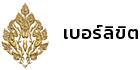
<style>
.page{position:relative;width:140px;height:70px;background:#ffffff}
.page>*{position:absolute;margin:0}
.t1{font:18px "Kanit-Medium";letter-spacing:0.04em;color:#000000}
</style>
<div class="page">
<p class="t1" style="left:64px;top:25px;width:74px;height:14px">เบอร์ลิขิต</p>
</div>
